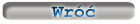
<style>
.page{position:relative;width:140px;height:24px}
.page>*{position:absolute;margin:0}
.t1{font:18px "CourierNewPS-BoldMT"}
</style>
<div class="page">
<p class="t1" style="left:51px;top:5px;width:44px;height:13px">Wróć</p>
</div>
